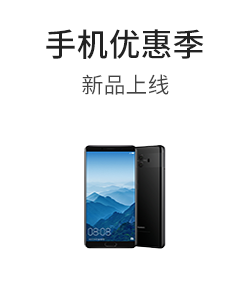
<style>
.page{position:relative;width:250px;height:290px;background:#ffffff}
.page>*{position:absolute;margin:0}
.t1{font:32px "SourceHanSansCN-Medium";color:#222222}
.t2{font:22px "SourceHanSansCN-Regular";color:#444444}
</style>
<div class="page">
<p class="t1" style="left:46px;top:29px;width:158px;height:30px">手机优惠季</p>
<p class="t2" style="left:82px;top:74px;width:87px;height:21px">新品上线</p>
</div>
